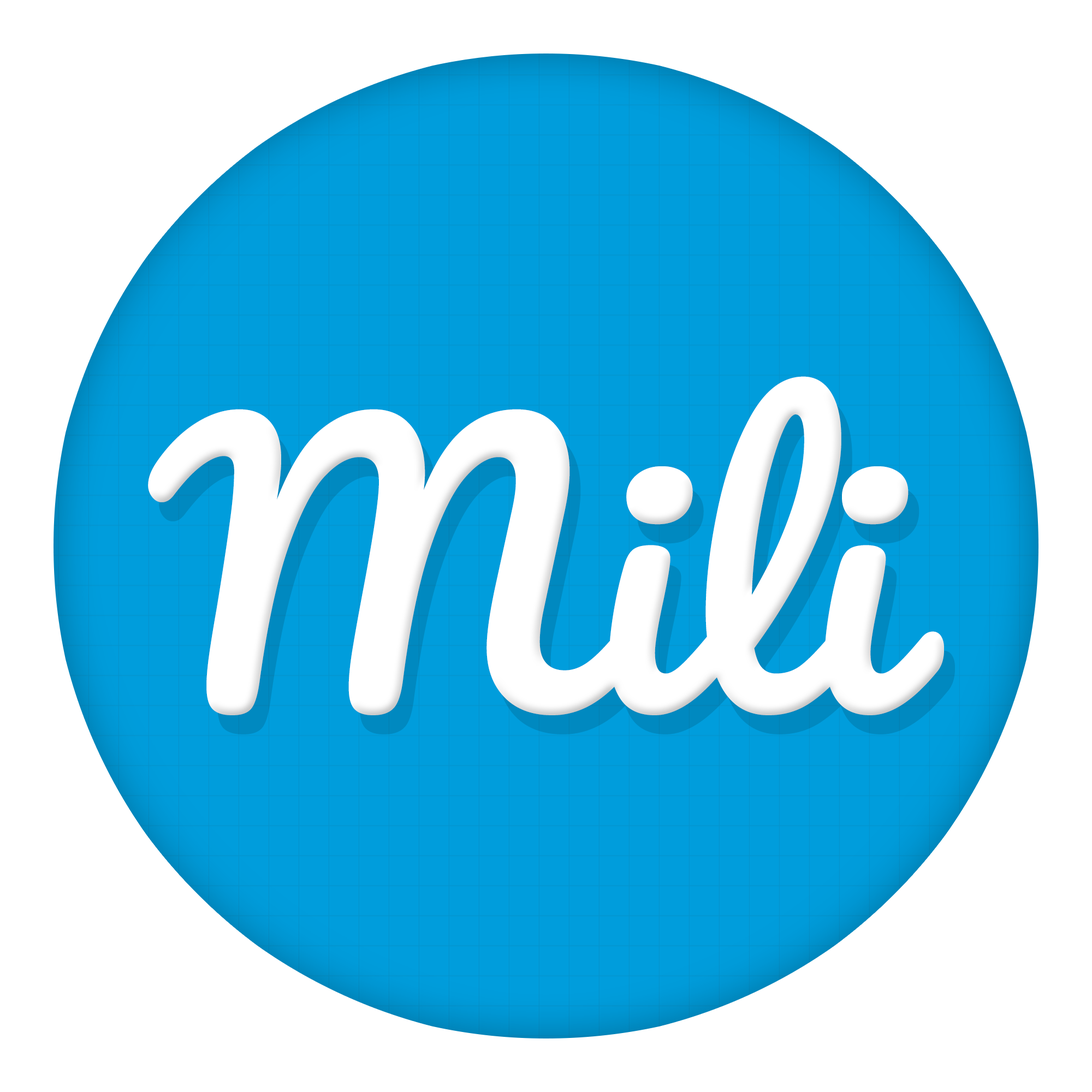
<style>
.page{position:relative;width:1092px;height:1092px;background:#ffffff}
.page>*{position:absolute;margin:0}
.t1{font:355.6px "Pacifico-Regular";letter-spacing:-0.01em;color:#ffffff;font-weight:bold}
</style>
<div class="page">
<p class="t1" style="left:148px;top:376px;width:796px;height:339px">Mili</p>
</div>
